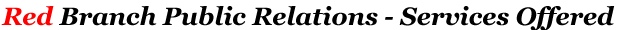
<style>
.page{position:relative;width:617px;height:30px;background:#ffffff}
.page>*{position:absolute;margin:0}
.t1{font:25px "Georgia-BoldItalic";color:#000000}
.t2{font:25px "Georgia-BoldItalic";color:#ff0000}
</style>
<div class="page">
<p class="t1" style="left:1px;top:6px;width:614px;height:24px"><span class="t2">Red</span> Branch Public Relations - Services Offered</p>
</div>
